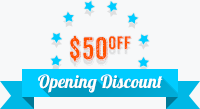
<style>
.page{position:relative;width:200px;height:109px;background:#f7f8f9}
.page>*{position:absolute;margin:0}
.t1{font:30px "AnodyneCombined";letter-spacing:0.025em;color:#ff5200}
.t2{font:18px "Lobster1.4";color:#ffffff}
</style>
<div class="page">
<p class="t1" style="left:70px;top:35px;width:62px;height:28px">$50off</p>
<p class="t2" style="left:38px;top:74px;width:125px;height:19px">Opening Discount</p>
</div>
